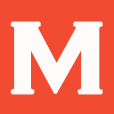
<style>
.page{position:relative;width:114px;height:114px;background:#f14b32}
.page>*{position:absolute;margin:0}
.t1{font:105px "CopperplateGothic-Bold";letter-spacing:0.005em;color:#fefbfb;font-weight:bold}
</style>
<div class="page">
<p class="t1" style="left:10px;top:21px;width:93px;height:74px">M</p>
</div>
